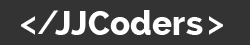
<style>
.page{position:relative;width:250px;height:45px;background:#333333}
.page>*{position:absolute;margin:0}
.t1{font:33.3px "Raleway-SemiBold";color:#ffffff}
.t2{font:33.3px "Raleway-ExtraBold";color:#ffffff}
</style>
<div class="page">
<p class="t1" style="left:21px;top:10px;width:38px;height:25px">&lt;/</p>
<p class="t2" style="left:55px;top:10px;width:148px;height:25px">JJCoders</p>
<p class="t1" style="left:209px;top:16px;width:14px;height:19px">&gt;</p>
</div>
